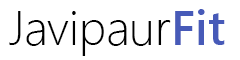
<style>
.page{position:relative;width:240px;height:60px;background:#ffffff}
.page>*{position:absolute;margin:0}
.t1{font:48px "SegoeUI-Light";color:#000000}
.t2{font:48px "SegoeUI-SemiBold";color:#475ab8}
</style>
<div class="page">
<p class="t1" style="left:9px;top:9px;width:216px;height:47px">Javipaur<span class="t2">Fit</span></p>
</div>
